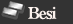
<style>
.page{position:relative;width:73px;height:24px;background:#333333}
.page>*{position:absolute;margin:0}
.t1{font:16px "RyuminPro-ExBold";letter-spacing:-0.08em;color:#fcf3ee}
</style>
<div class="page">
<p class="t1" style="left:28px;top:6px;width:29px;height:14px">Besi</p>
</div>
